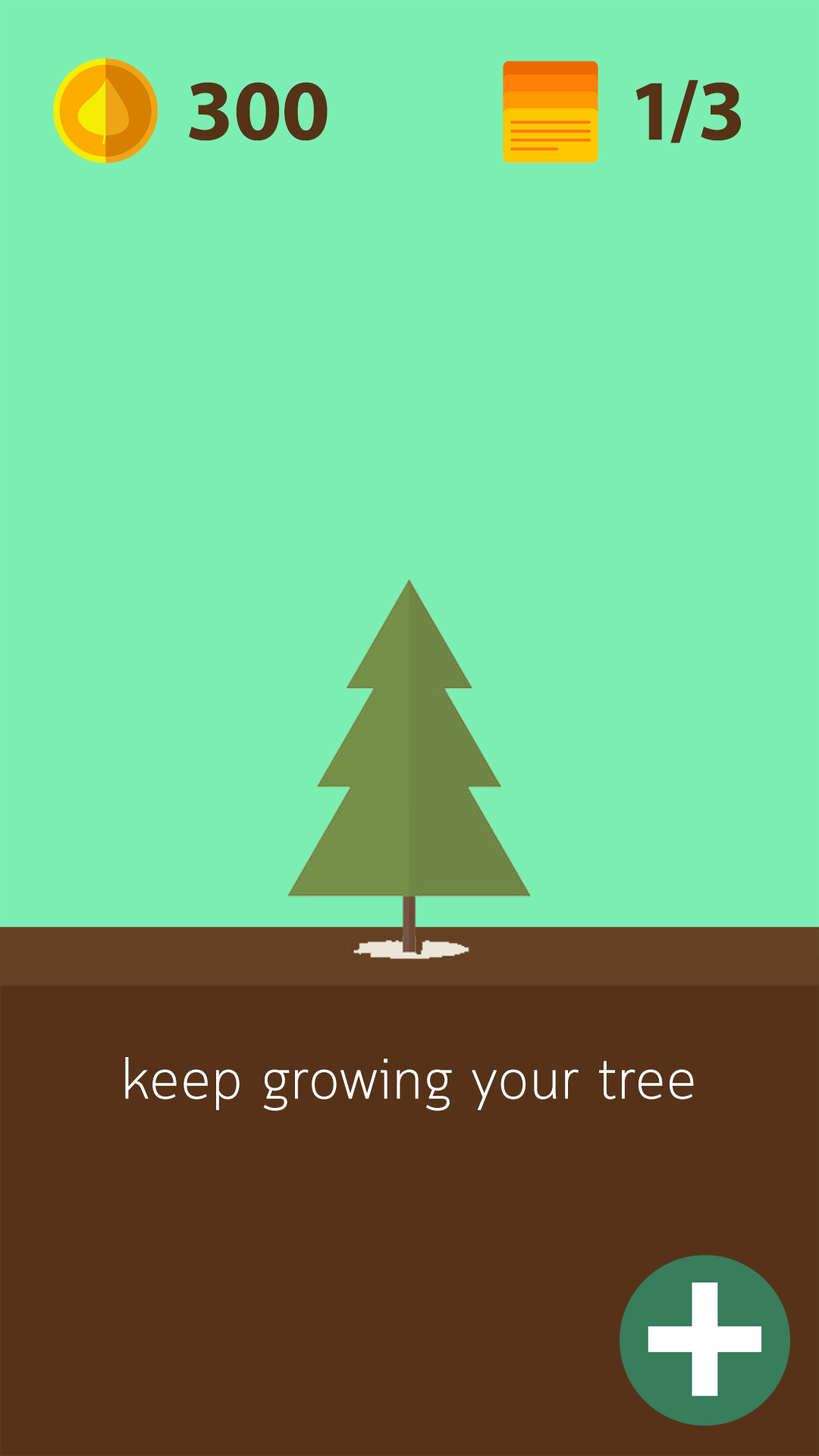
<style>
.page{position:relative;width:819px;height:1456px;background:#7befb2}
.page>*{position:absolute;margin:0}
.t1{font:113.7px "TFPhethai";color:#563218}
.t2{font:56.9px "Cloud-Light";color:#ffffff}
</style>
<div class="page">
<p class="t1" style="left:189px;top:82px;width:139px;height:59px">300</p>
<p class="t1" style="left:635px;top:80px;width:106px;height:63px">1/3</p>
<p class="t2" style="left:125px;top:1057px;width:569px;height:54px">keep growing your tree</p>
</div>
